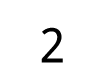
<style>
.page{position:relative;width:105px;height:83px;background:#ffffff}
.page>*{position:absolute;margin:0}
.t1{font:47.9px "DroidSans";color:#000000}
</style>
<div class="page">
<p class="t1" style="left:41px;top:27px;width:22px;height:36px">2</p>
</div>
